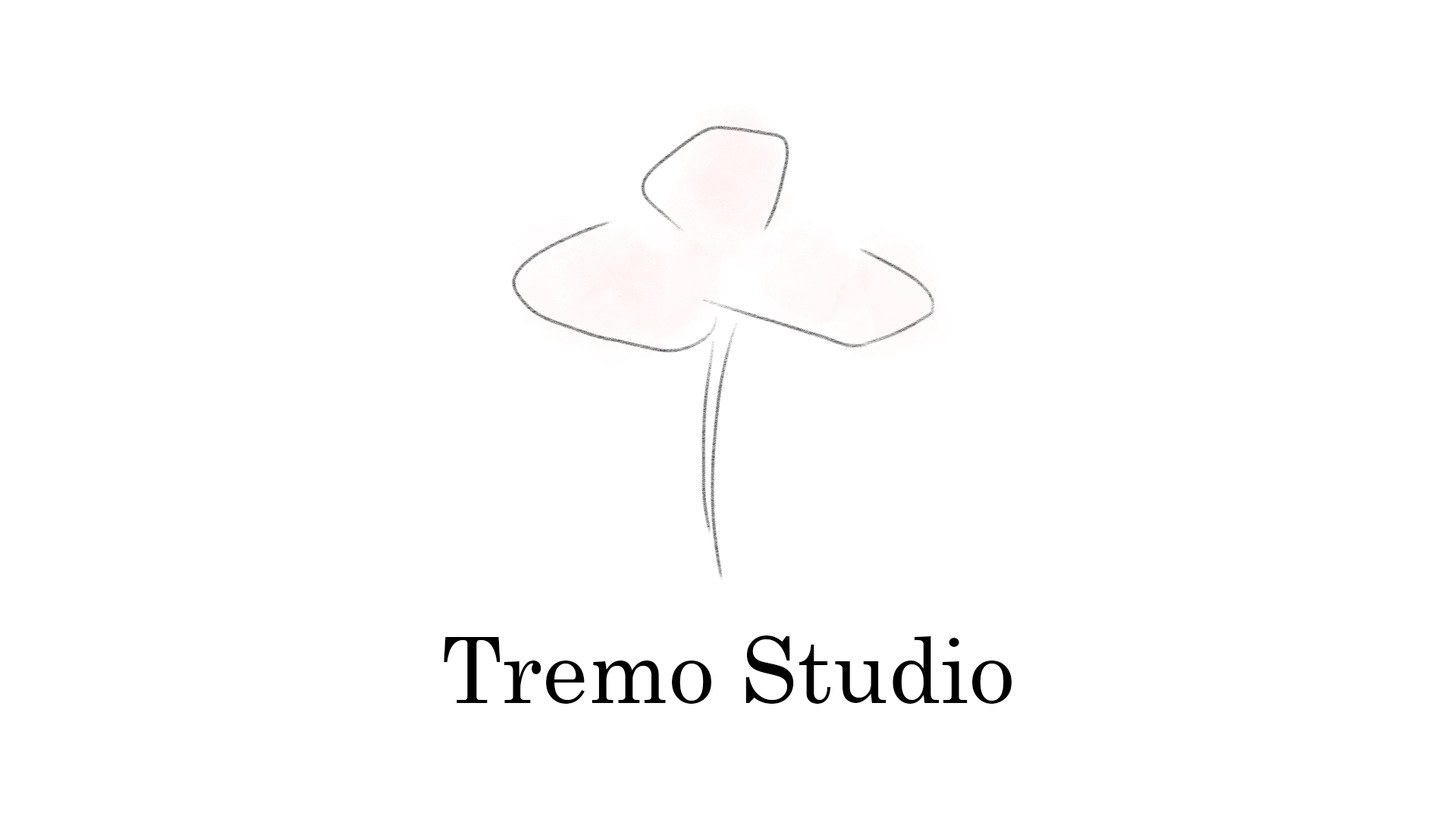
<style>
.page{position:relative;width:1456px;height:819px;background:#ffffff}
.page>*{position:absolute;margin:0}
.t1{font:91px "Century";color:#000000}
</style>
<div class="page">
<p class="t1" style="left:444px;top:635px;width:568px;height:69px">Tremo Studio</p>
</div>
